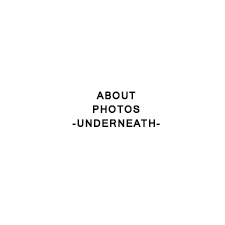
<style>
.page{position:relative;width:225px;height:225px;background:#ffffff}
.page>*{position:absolute;margin:0}
.t1{font:10px/12px "Mangal-Bold";letter-spacing:0.03em;color:#000000;text-transform:uppercase;font-weight:bold}
</style>
<div class="page">
<p class="t1" style="left:72px;top:91px;width:88px;height:36px;text-align:center">about<br>photos<br>-underneath-</p>
</div>
